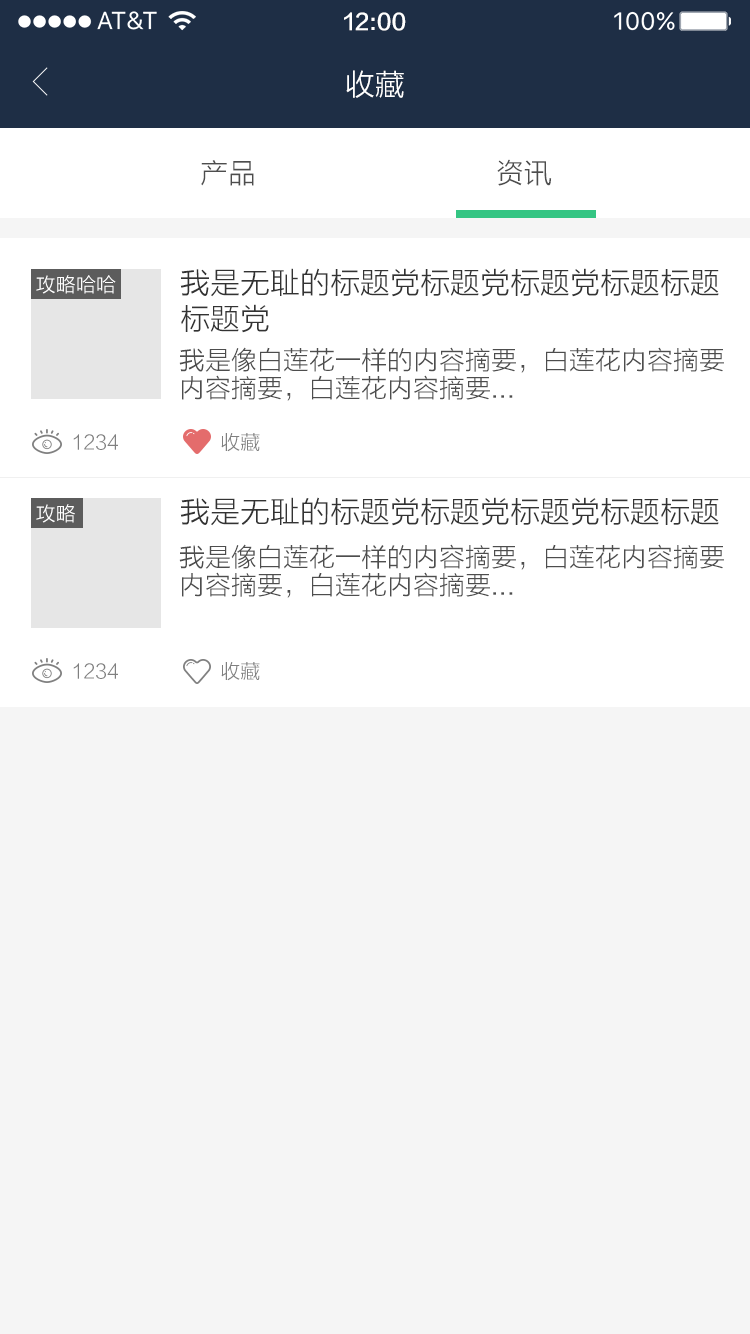
<style>
.page{position:relative;width:750px;height:1334px;background:#f5f5f5}
.page>*{position:absolute;margin:0}
.t1{font:22px "FZLTZHK--GBK1-0";color:#ffffff}
.t2{font:30px "FZLTXHK";color:#ffffff}
.t3{font:28px "FZLTXHK";color:#4d4d4d}
.t4{font:30px/36px "FZLTXHK";color:#333333}
.t5{font:20px "FZLTXHK";color:#ffffff}
.t6{font:26px/28px "FZLTXHK";color:#4d4d4d}
.t7{font:20px "FZLTXHK";color:#808080}
.t8{font:30px "FZLTXHK";color:#333333}
</style>
<div class="page">
<p class="t1" style="left:344px;top:12px;width:62px;height:19px">12:00</p>
<p class="t2" style="left:346px;top:70px;width:58px;height:28px">收藏</p>
<p class="t3" style="left:201px;top:160px;width:53px;height:26px">产品</p>
<p class="t3" style="left:497px;top:159px;width:55px;height:27px">资讯</p>
<p class="t4" style="left:180px;top:268px;width:539px;height:65px">我是无耻的标题党标题党标题党标题标题<br>标题党</p>
<p class="t5" style="left:36px;top:275px;width:80px;height:19px">攻略哈哈</p>
<p class="t6" style="left:179px;top:347px;width:545px;height:54px">我是像白莲花一样的内容摘要，白莲花内容摘要<br>内容摘要，白莲花内容摘要...</p>
<p class="t7" style="left:73px;top:434px;width:45px;height:16px">1234</p>
<p class="t7" style="left:221px;top:433px;width:39px;height:19px">收藏</p>
<p class="t8" style="left:180px;top:497px;width:539px;height:29px">我是无耻的标题党标题党标题党标题标题</p>
<p class="t5" style="left:36px;top:504px;width:39px;height:19px">攻略</p>
<p class="t6" style="left:179px;top:544px;width:545px;height:54px">我是像白莲花一样的内容摘要，白莲花内容摘要<br>内容摘要，白莲花内容摘要...</p>
<p class="t7" style="left:73px;top:663px;width:45px;height:16px">1234</p>
<p class="t7" style="left:221px;top:662px;width:39px;height:19px">收藏</p>
</div>
